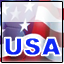
<style>
.page{position:relative;width:64px;height:64px}
.page>*{position:absolute;margin:0}
.t1{font:24px "Arial-Black";font-weight:bold}
</style>
<div class="page">
<p class="t1" style="left:4px;top:37px;width:57px;height:19px">USA</p>
</div>
